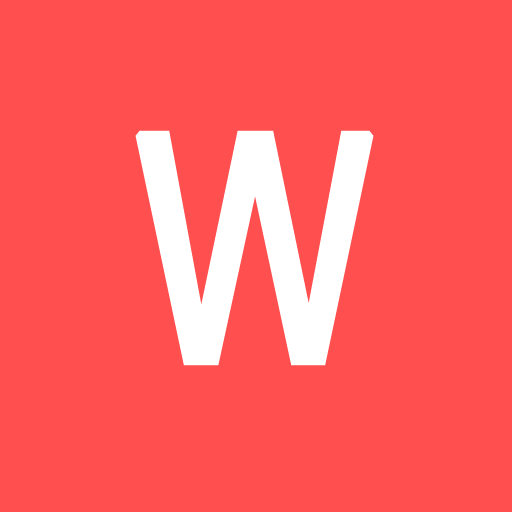
<style>
.page{position:relative;width:512px;height:512px;background:#ff4f4f}
.page>*{position:absolute;margin:0}
.t1{font:300px "#9Slide03SwissCondensed-Regular";letter-spacing:-0.025em;color:#ffffff;font-weight:bold}
</style>
<div class="page">
<p class="t1" style="left:135px;top:130px;width:239px;height:236px">W</p>
</div>
